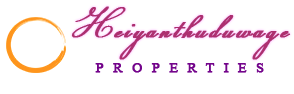
<style>
.page{position:relative;width:294px;height:94px;background:#ffffff}
.page>*{position:absolute;margin:0}
.t1{font:44.5px "Champignon";letter-spacing:0.043em;color:#ad2f70;font-weight:bold}
.t2{font:41.3px "Champignon";letter-spacing:0.043em;color:#ad2f70;font-weight:bold}
.t3{font:13px "TimesNewRomanPSMT";letter-spacing:0.623em;color:#73048b;text-transform:uppercase;font-weight:bold;scale:1.11 1}
</style>
<div class="page">
<p class="t1" style="left:71px;top:6px;width:220px;height:54px"><span class="t2">H</span>eiyanthuduwage</p>
<p class="t3" style="left:95px;top:63px;width:169px;height:10px">Properties</p>
</div>
